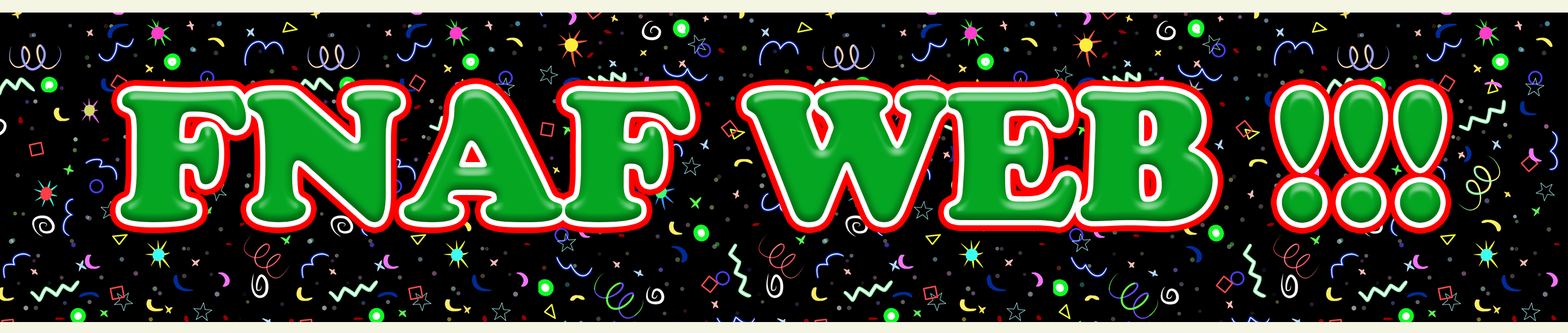
<style>
.page{position:relative;width:1568px;height:333px;background:#000000}
.page>*{position:absolute;margin:0}
.t1{font:182.2px "CooperBlackStd";color:#04a622}
</style>
<div class="page">
<p class="t1" style="left:120px;top:89px;width:1322px;height:134px">FNAF WEB !!!</p>
</div>
